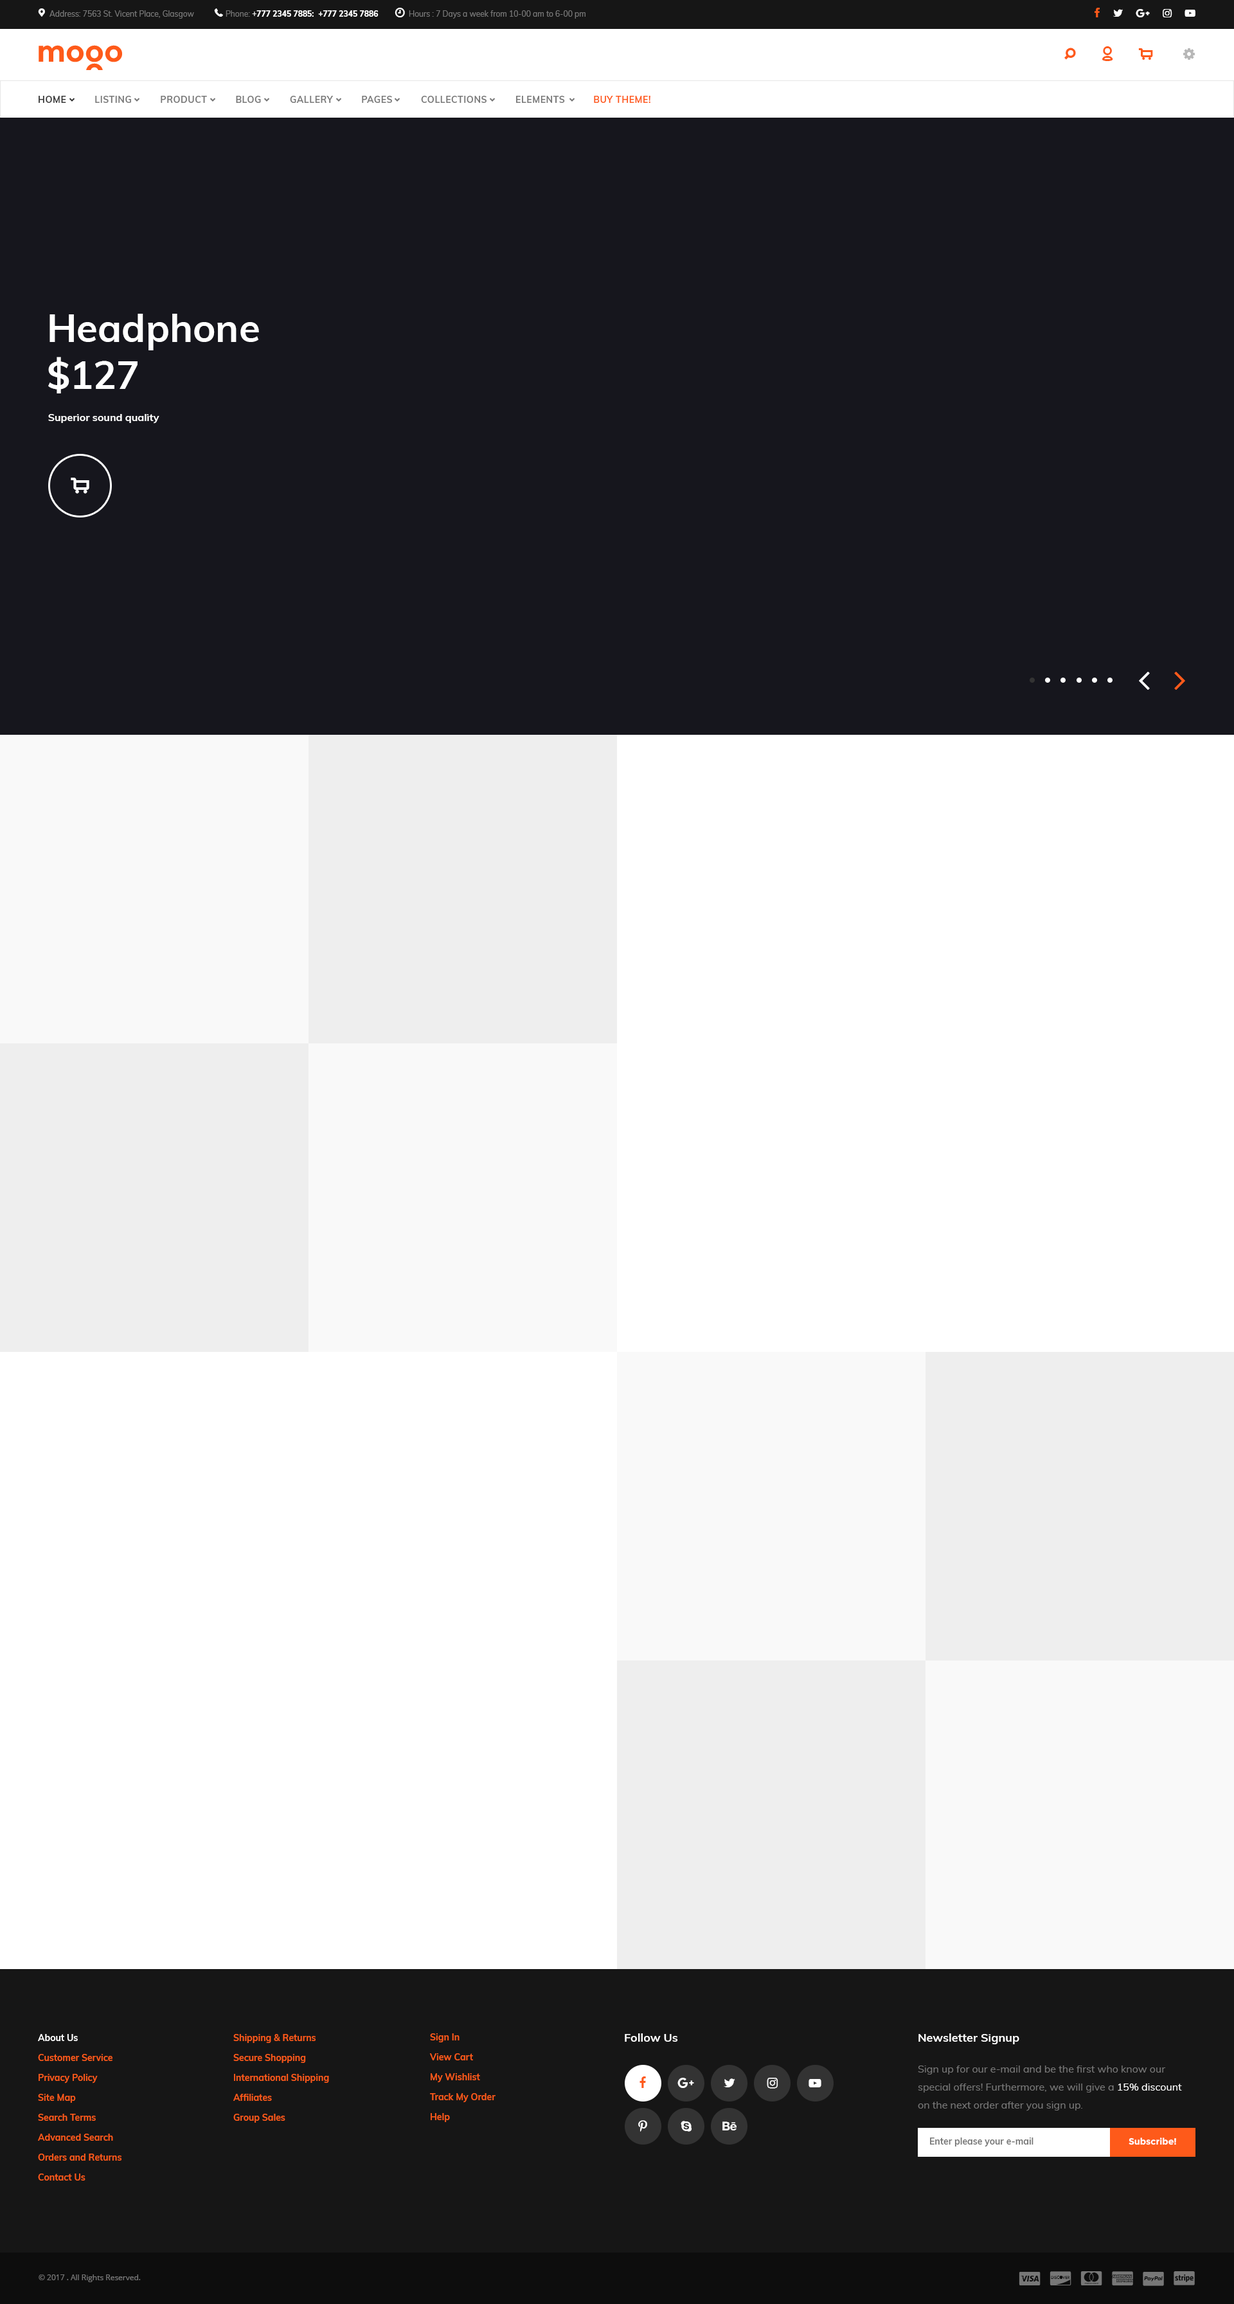
<style>
.page{position:relative;width:1234px;height:2304px;background:#ffffff}
.page>*{position:absolute;margin:0}
.t1{font:7.7px "Muli-Regular";color:#777777}
.t2{font:7.7px "Muli-ExtraBold";color:#ffffff}
.t3{font:7.7px "Muli-Regular";color:#ffffff}
.t4{font:9px "Muli-Bold";letter-spacing:0.04em;color:#777777;text-transform:uppercase}
.t5{font:9px "Muli-Bold";letter-spacing:0.04em;color:#333333;text-transform:uppercase}
.t6{font:9px "Muli-Bold";letter-spacing:0.04em;color:#fe5a1a;text-transform:uppercase}
.t7{font:38.6px/46.9px "Muli-Bold";color:#ffffff}
.t8{font:10.3px "Muli-Bold";color:#ffffff}
.t9{font:9px/19.9px "Muli-Bold";color:#fe5a1a}
.t10{font:11.6px "Muli-Bold";color:#ffffff}
.t11{font:9px/19.9px "Muli-Bold";color:#ffffff}
.t12{font:10.3px/18px "Muli-Regular";color:#777777}
.t13{font:10.3px/18px "Muli-Regular";color:#ffffff}
.t14{font:9px "Muli-Bold";color:#777777}
.t15{font:9px "Montserrat-Bold";color:#ffffff}
.t16{font:7.7px "OpenSans";color:#777777}
</style>
<div class="page">
<p class="t1" style="left:50px;top:10px;width:144px;height:9px">Address: 7563 St. Vicent Place, Glasgow</p>
<p class="t2" style="left:226px;top:10px;width:153px;height:7px"><span class="t1">Phone: </span><span class="t3">+</span>777 2345 7885:  +777 2345 7886</p>
<p class="t1" style="left:409px;top:10px;width:177px;height:9px">Hours : 7 Days a week from 10-00 am to 6-00 pm</p>
<p class="t4" style="left:39px;top:96px;width:612px;height:7px"><span class="t5">hOME    </span>      lISTING          pRODUCT          bLOG          gALLERY          pAGES          Collections          elements          <span class="t6">BUY THEME!</span></p>
<p class="t7" style="left:48px;top:314px;width:211px;height:79px">Headphone<br>$127</p>
<p class="t8" style="left:48px;top:414px;width:111px;height:10px">Superior sound quality</p>
<p class="t9" style="left:429px;top:2033px;width:67px;height:89px">Sign In<br>View Cart<br>My Wishlist<br>Track My Order<br>Help</p>
<p class="t10" style="left:625px;top:2033px;width:53px;height:9px">Follow Us</p>
<p class="t10" style="left:919px;top:2033px;width:101px;height:11px">Newsletter Signup</p>
<p class="t9" style="left:38px;top:2034px;width:84px;height:147px"><span class="t11">About Us<br></span>Customer Service<br>Privacy Policy<br>Site Map<br>Search Terms<br>Advanced Search<br>Orders and Returns<br>Contact Us</p>
<p class="t9" style="left:233px;top:2034px;width:96px;height:89px">Shipping &amp; Returns<br>Secure Shopping<br>International Shipping<br>Affiliates<br>Group Sales</p>
<p class="t12" style="left:918px;top:2066px;width:264px;height:45px">Sign up for our e-mail and be the first who know our special offers! Furthermore, we will give a <span class="t13">15% discount </span>on the next order after you sign up.</p>
<p class="t14" style="left:930px;top:2138px;width:104px;height:9px">Enter please your e-mail</p>
<p class="t15" style="left:1129px;top:2138px;width:47px;height:7px">Subscribe!</p>
<p class="t16" style="left:39px;top:2274px;width:102px;height:8px">© 2017 . All Rights Reserved.</p>
</div>
